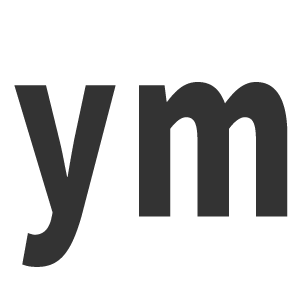
<style>
.page{position:relative;width:300px;height:300px;background:#ffffff}
.page>*{position:absolute;margin:0}
.t1{font:230.4px "SourceHanSansCN-Heavy";letter-spacing:0.05em;color:#333333;scale:0.76 1}
</style>
<div class="page">
<p class="t1" style="left:14px;top:82px;width:274px;height:185px">ym</p>
</div>
